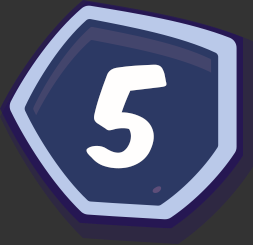
<style>
.page{position:relative;width:253px;height:245px;background:#2c3964}
.page>*{position:absolute;margin:0}
.t1{font:120px "KomikaAxis";color:#fffefd}
</style>
<div class="page">
<p class="t1" style="left:86px;top:64px;width:81px;height:105px">5</p>
</div>
